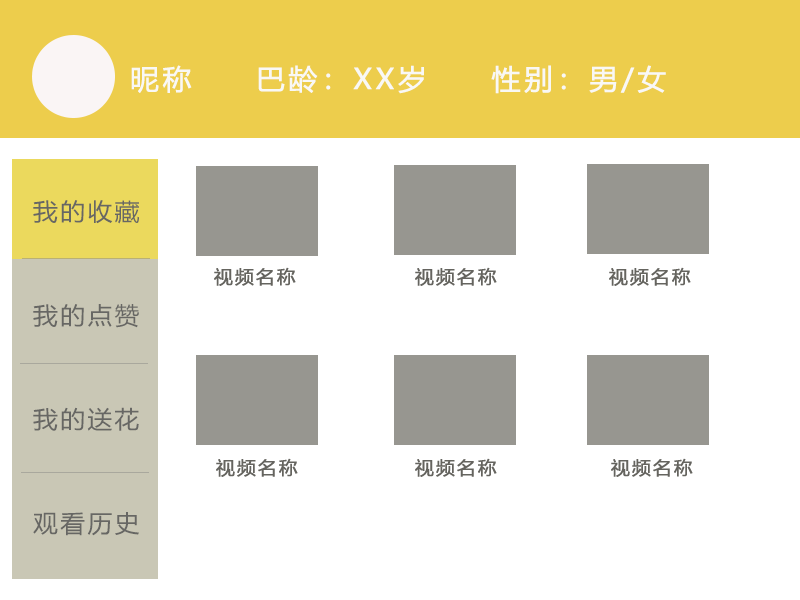
<style>
.page{position:relative;width:800px;height:600px;background:#ffffff}
.page>*{position:absolute;margin:0}
.t1{font:28px "MicrosoftYaHei";letter-spacing:0.1em;color:#f9f8f5;font-weight:bold;scale:1.03 1}
.t2{font:24px/103.9px "MicrosoftYaHei";letter-spacing:0.1em;color:#676764;scale:1.03 1}
</style>
<div class="page">
<p class="t1" style="left:131px;top:65px;width:535px;height:29px">昵称     巴龄：XX岁     性别：男/女</p>
<p class="t2" style="left:33px;top:200px;width:106px;height:336px">我的收藏<br>我的点赞<br>我的送花<br>观看历史</p>
</div>
